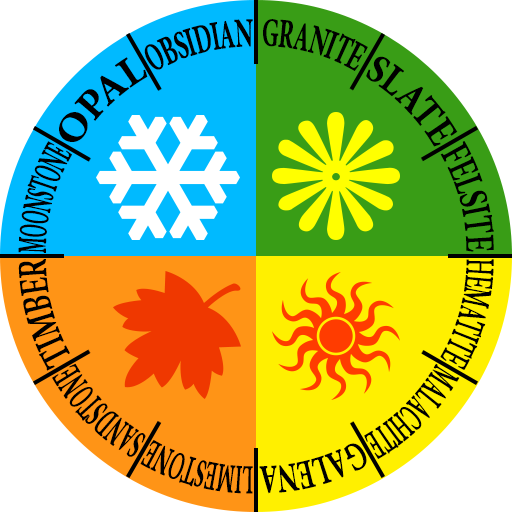
<style>
.page{position:relative;width:512px;height:512px;background:#ffffff}
.page>*{position:absolute;margin:0}
.t1{font:40px "MinionPro-Bold";color:#000000;scale:0.49 1}
.t2{font:40px "MinionPro-Bold";color:#000000;scale:0.5 1}
.t3{font:40px "MinionPro-Bold";color:#000000;scale:0.94 1}
.t4{font:40px "MinionPro-Bold";color:#000000;scale:0.81 1}
.t5{font:40px "MinionPro-Bold";color:#000000;scale:0.37 1}
.t6{font:40px "MinionPro-Bold";color:#000000;scale:0.62 1}
.t7{font:40px "MinionPro-Bold";color:#000000;scale:0.46 1}
.t8{font:40px "MinionPro-Bold";color:#000000;scale:0.4 1}
.t9{font:40px "MinionPro-Bold";color:#000000;scale:0.43 1}
.t10{font:40px "MinionPro-Bold";color:#000000;scale:0.6 1}
</style>
<div class="page">
<p class="t1" style="left:144px;top:19px;width:109px;height:51px;rotate:-15deg">OBSIDIAN</p>
<p class="t2" style="left:263px;top:19px;width:105px;height:52px;rotate:15deg">GRANITE</p>
<p class="t3" style="left:59px;top:57px;width:89px;height:85px;rotate:-45deg">OPAL</p>
<p class="t4" style="left:366px;top:56px;width:92px;height:91px;rotate:45deg">SLATE</p>
<p class="t5" style="left:18px;top:141px;width:54px;height:112px;rotate:-75deg">MOONSTONE</p>
<p class="t6" style="left:440px;top:141px;width:54px;height:111px;rotate:75deg">FELSITE</p>
<p class="t6" style="left:18px;top:259px;width:52px;height:112px;rotate:-105deg">TIMBER</p>
<p class="t7" style="left:440px;top:259px;width:54px;height:111px;rotate:105deg">HEMATITE</p>
<p class="t8" style="left:52px;top:363px;width:94px;height:94px;rotate:-135deg">SANDSTONE</p>
<p class="t8" style="left:364px;top:363px;width:96px;height:96px;rotate:135deg">MALACHITE</p>
<p class="t9" style="left:140px;top:440px;width:113px;height:54px;rotate:-165deg">LIMESTONE</p>
<p class="t10" style="left:259px;top:443px;width:108px;height:51px;rotate:165deg">GALENA</p>
</div>
